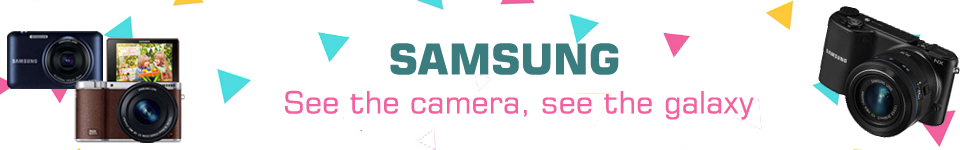
<style>
.page{position:relative;width:960px;height:150px;background:#ffffff}
.page>*{position:absolute;margin:0}
.t1{font:42px "Square721BT-Bold";color:#3b7c7e}
.t2{font:30.5px "Square721BT-Roman";color:#f5609e}
</style>
<div class="page">
<p class="t1" style="left:390px;top:43px;width:229px;height:32px">SAMSUNG</p>
<p class="t2" style="left:285px;top:90px;width:469px;height:30px">See the camera, see the galaxy</p>
</div>
